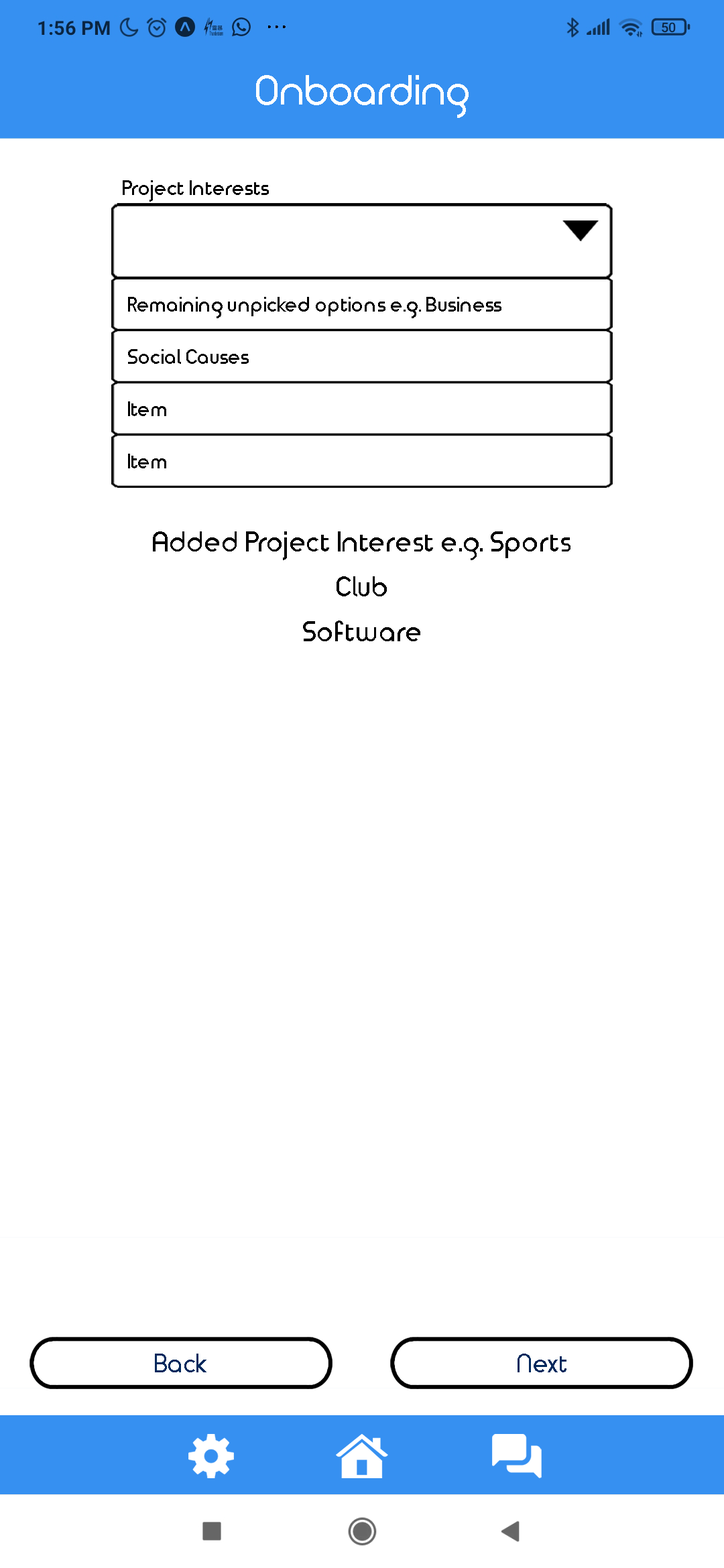
<style>
.page{position:relative;width:724px;height:1568px;background:#ffffff}
.page>*{position:absolute;margin:0}
.t1{font:20.1px "TimeBurner-Bold";color:#000000}
.t2{font:27.5px "TimeBurner-Bold";color:#000000}
</style>
<div class="page">
<p class="t1" style="left:123px;top:180px;width:146px;height:22px">Project Interests</p>
<p class="t1" style="left:128px;top:297px;width:373px;height:21px">Remaining unpicked options e.g. Business</p>
<p class="t1" style="left:128px;top:349px;width:121px;height:15px">Social Causes</p>
<p class="t1" style="left:128px;top:401px;width:38px;height:15px">Item</p>
<p class="t1" style="left:128px;top:454px;width:38px;height:14px">Item</p>
<p class="t2" style="left:153px;top:531px;width:417px;height:29px">Added Project Interest e.g. Sports</p>
<p class="t2" style="left:336px;top:576px;width:51px;height:20px">Club</p>
<p class="t2" style="left:303px;top:620px;width:117px;height:21px">Software</p>
</div>
